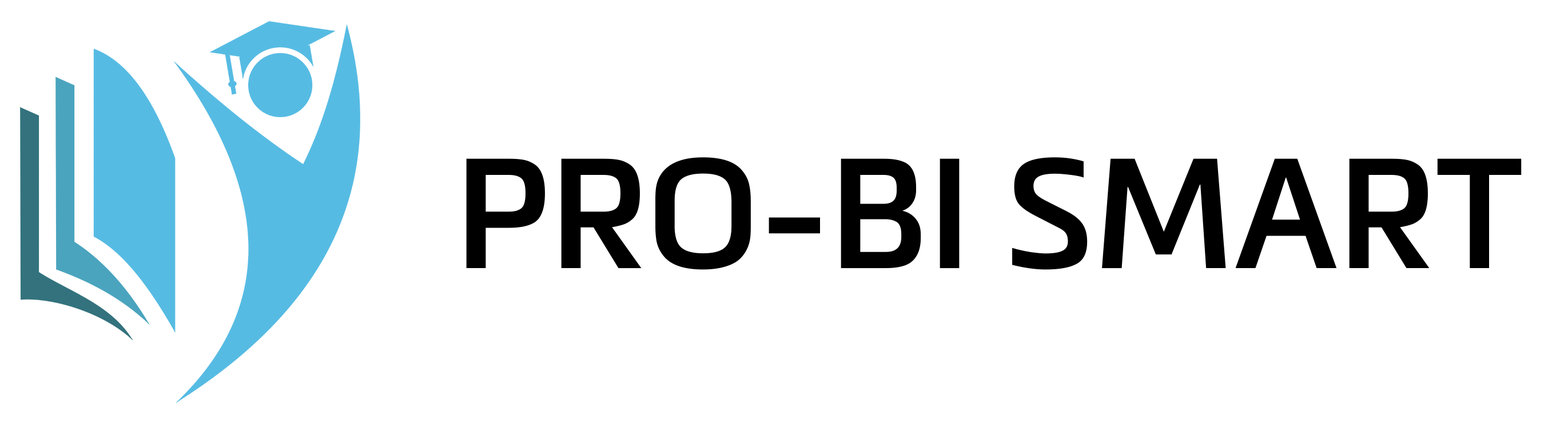
<style>
.page{position:relative;width:1568px;height:443px;background:#ffffff}
.page>*{position:absolute;margin:0}
.t1{font:153.5px "MetronicPro-SemiBold";color:#000000}
</style>
<div class="page">
<p class="t1" style="left:466px;top:157px;width:1056px;height:113px">PRO-BI SMART</p>
</div>
